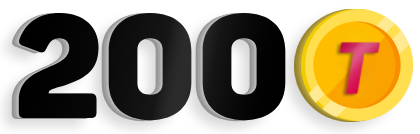
<style>
.page{position:relative;width:420px;height:134px}
.page>*{position:absolute;margin:0}
.t1{font:145px "Panton-BlackCaps";color:#000000}
</style>
<div class="page">
<p class="t1" style="left:18px;top:12px;width:268px;height:109px">200</p>
</div>
